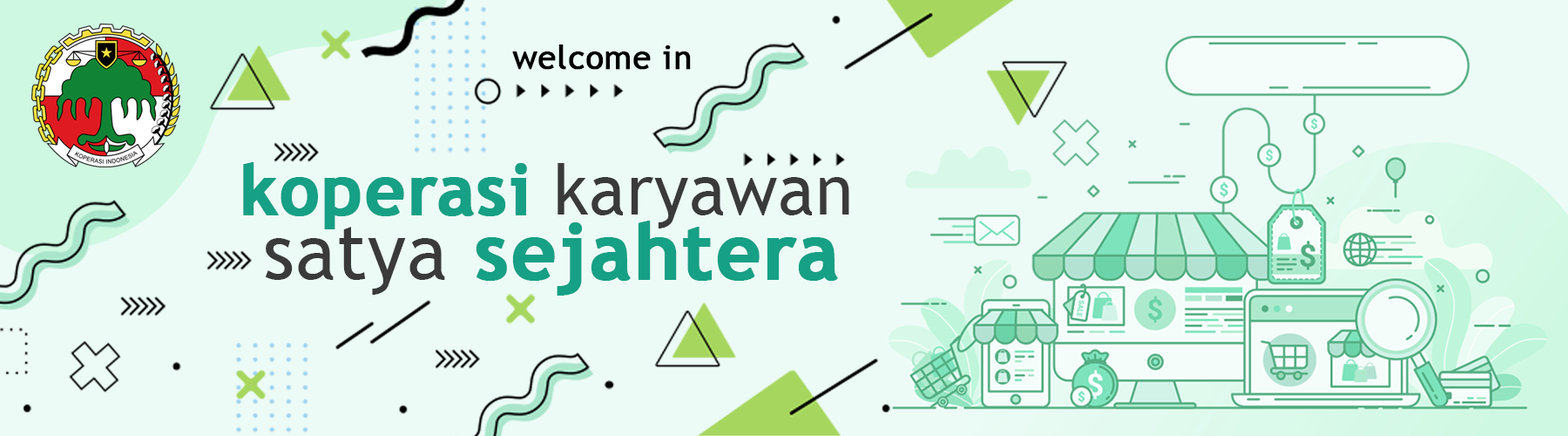
<style>
.page{position:relative;width:1568px;height:436px;background:#edfbf7}
.page>*{position:absolute;margin:0}
.t1{font:32.8px "TrebuchetMS";letter-spacing:0.01em;color:#000000;font-weight:bold}
.t2{font:69.5px "TrebuchetMS-Bold";letter-spacing:0.01em;color:#16a085;font-weight:bold}
.t3{font:69.5px "TrebuchetMS";letter-spacing:0.01em;color:#3a3a3a}
.t4{font:77.4px "TrebuchetMS-Bold";letter-spacing:0.01em;color:#16a085;font-weight:bold}
.t5{font:77.4px "TrebuchetMS";letter-spacing:0.01em;color:#3a3a3a}
</style>
<div class="page">
<p class="t1" style="left:512px;top:44px;width:179px;height:26px">welcome in</p>
<p class="t2" style="left:243px;top:162px;width:606px;height:67px">koperasi <span class="t3">karyawan</span></p>
<p class="t4" style="left:265px;top:220px;width:573px;height:75px"><span class="t5">satya</span> sejahtera</p>
</div>
